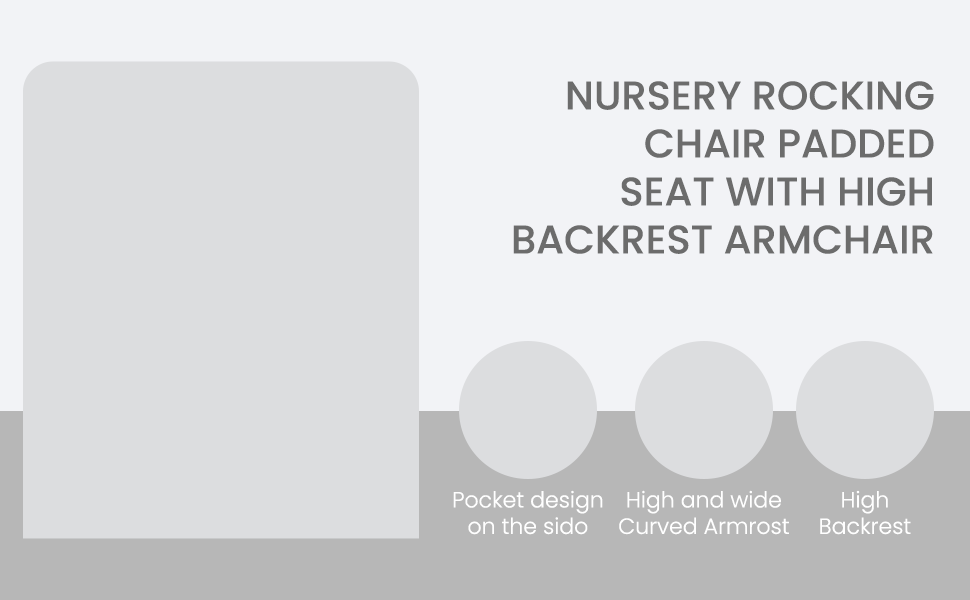
<style>
.page{position:relative;width:970px;height:600px;background:#dcdddf}
.page>*{position:absolute;margin:0}
.t1{font:40px "Poppins-Medium";color:#6c6c6c;text-transform:uppercase}
.t2{font:22px "Poppins-Light";color:#ffffff}
</style>
<div class="page">
<p class="t1" style="left:513px;top:81px;width:421px;height:173px;text-align:right">NURSERY ROCKING<br>CHAIR PADDED<br>SEAT WITH HIGH<br>BACKREST ARMCHAIR</p>
<p class="t2" style="left:453px;top:490px;width:150px;height:45px;text-align:center">Pocket design<br>on the sido</p>
<p class="t2" style="left:619px;top:490px;width:170px;height:45px;text-align:center">High and wide<br>Curved Armrost</p>
<p class="t2" style="left:820px;top:490px;width:91px;height:45px;text-align:center">High<br>Backrest</p>
</div>
